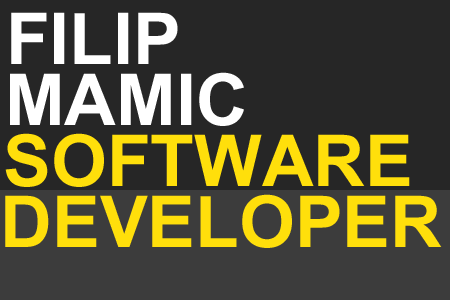
<style>
.page{position:relative;width:450px;height:300px;background:#262626}
.page>*{position:absolute;margin:0}
.t1{font:100px "Utsaah-Bold";color:#ffffff}
.t2{font:100px "Utsaah-Bold";color:#ffdf0b}
</style>
<div class="page">
<p class="t1" style="left:11px;top:12px;width:167px;height:52px">FILIP</p>
<p class="t1" style="left:10px;top:72px;width:234px;height:54px">MAMIC</p>
<p class="t2" style="left:5px;top:133px;width:405px;height:54px">SOFTWARE</p>
<p class="t2" style="left:5px;top:194px;width:437px;height:54px">DEVELOPER</p>
</div>
